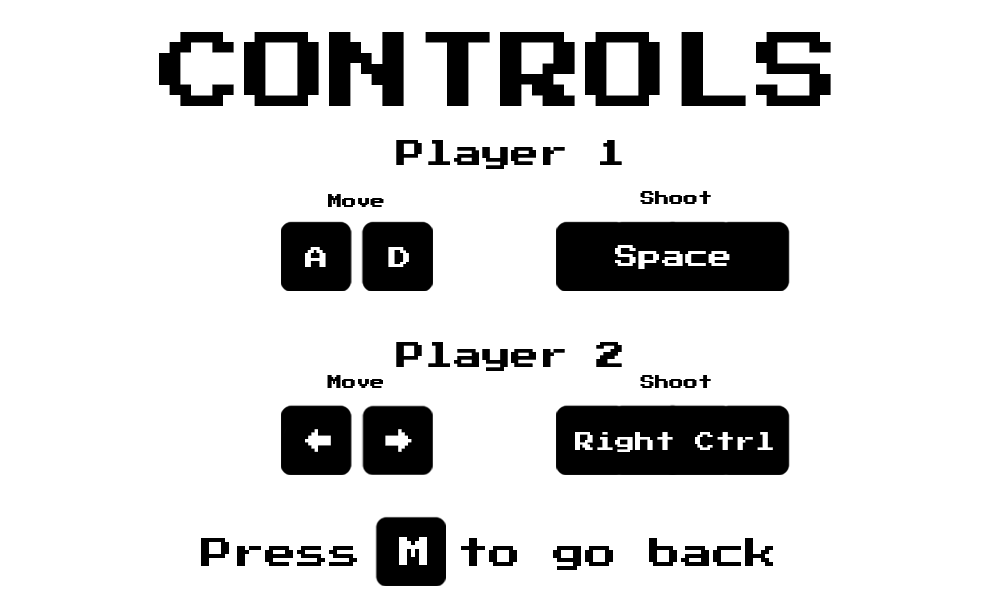
<style>
.page{position:relative;width:1000px;height:600px;background:#ffffff}
.page>*{position:absolute;margin:0}
.t1{font:85.2px "PressStart2P-Regular";color:#000000}
.t2{font:28.5px "PressStart2P-Regular";color:#000000}
.t3{font:14px "PressStart2P-Regular";color:#000000}
.t4{font:14.2px "PressStart2P-Regular";color:#000000}
.t5{font:23.3px "PressStart2P-Regular";color:#ffffff}
.t6{font:22.9px "PressStart2P-Regular";color:#ffffff}
.t7{font:13.9px "PressStart2P-Regular";color:#000000}
.t8{font:25.6px "PressStart2P-Regular";color:#ffffff}
.t9{font:19.9px "PressStart2P-Regular";color:#ffffff}
.t10{font:32px "PressStart2P-Regular";color:#000000}
.t11{font:32px "PressStart2P-Regular";color:#ffffff}
</style>
<div class="page">
<p class="t1" style="left:159px;top:32px;width:672px;height:74px">CONTROLS</p>
<p class="t2" style="left:396px;top:140px;width:226px;height:29px">Player 1</p>
<p class="t2" style="left:396px;top:140px;width:226px;height:29px">Player 1</p>
<p class="t3" style="left:328px;top:194px;width:56px;height:13px">Move</p>
<p class="t3" style="left:328px;top:194px;width:56px;height:13px">Move</p>
<p class="t4" style="left:640px;top:191px;width:71px;height:13px">Shoot</p>
<p class="t4" style="left:640px;top:191px;width:71px;height:13px">Shoot</p>
<p class="t5" style="left:615px;top:245px;width:115px;height:24px">Space</p>
<p class="t5" style="left:615px;top:245px;width:115px;height:24px">Space</p>
<p class="t6" style="left:305px;top:247px;width:21px;height:20px">A</p>
<p class="t6" style="left:305px;top:247px;width:21px;height:20px">A</p>
<p class="t6" style="left:388px;top:247px;width:21px;height:20px">D</p>
<p class="t6" style="left:388px;top:247px;width:21px;height:20px">D</p>
<p class="t2" style="left:396px;top:342px;width:226px;height:29px">Player 2</p>
<p class="t2" style="left:396px;top:342px;width:226px;height:29px">Player 2</p>
<p class="t7" style="left:327px;top:375px;width:56px;height:13px">Move</p>
<p class="t7" style="left:327px;top:375px;width:56px;height:13px">Move</p>
<p class="t4" style="left:640px;top:375px;width:71px;height:13px">Shoot</p>
<p class="t4" style="left:640px;top:375px;width:71px;height:13px">Shoot</p>
<p class="t8" style="left:305px;top:429px;width:26px;height:23px;rotate:180deg">→</p>
<p class="t8" style="left:305px;top:429px;width:26px;height:23px;rotate:180deg">→</p>
<p class="t8" style="left:385px;top:429px;width:27px;height:23px">→</p>
<p class="t8" style="left:385px;top:429px;width:27px;height:23px">→</p>
<p class="t9" style="left:575px;top:432px;width:198px;height:20px">Right Ctrl</p>
<p class="t9" style="left:575px;top:432px;width:198px;height:20px">Right Ctrl</p>
<p class="t10" style="left:201px;top:538px;width:572px;height:32px">Press   to go back</p>
<p class="t11" style="left:399px;top:537px;width:28px;height:28px">M</p>
</div>
